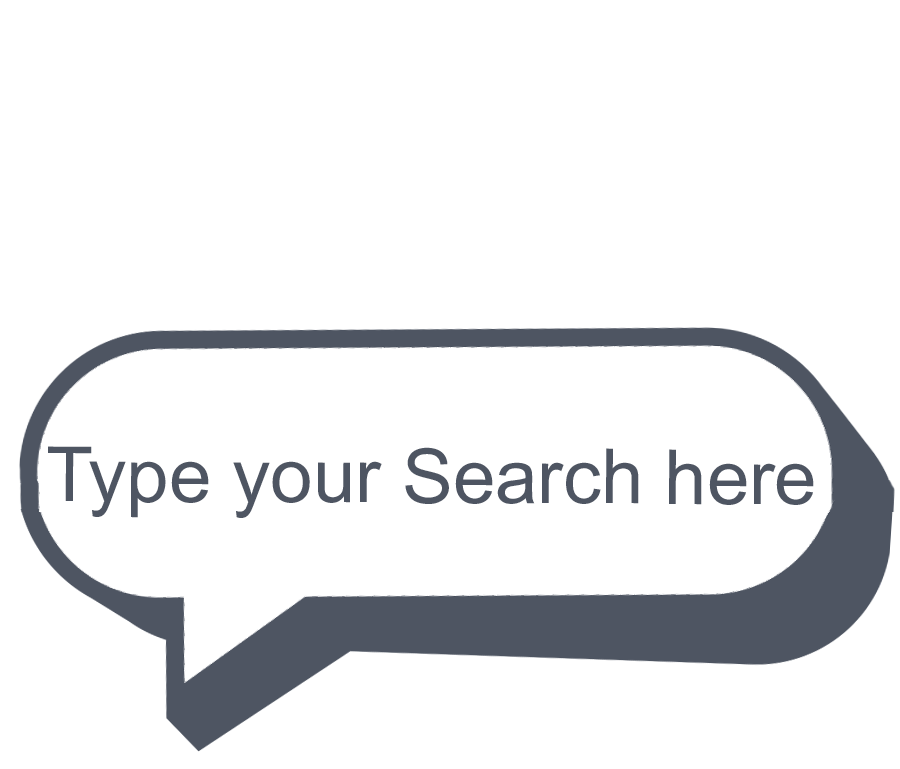
<style>
.page{position:relative;width:900px;height:769px;background:#ffffff}
.page>*{position:absolute;margin:0}
.t1{font:76px "ArialMT";color:#4e5562}
</style>
<div class="page">
<p class="t1" style="left:48px;top:446px;width:766px;height:72px">Type your Search here</p>
</div>
